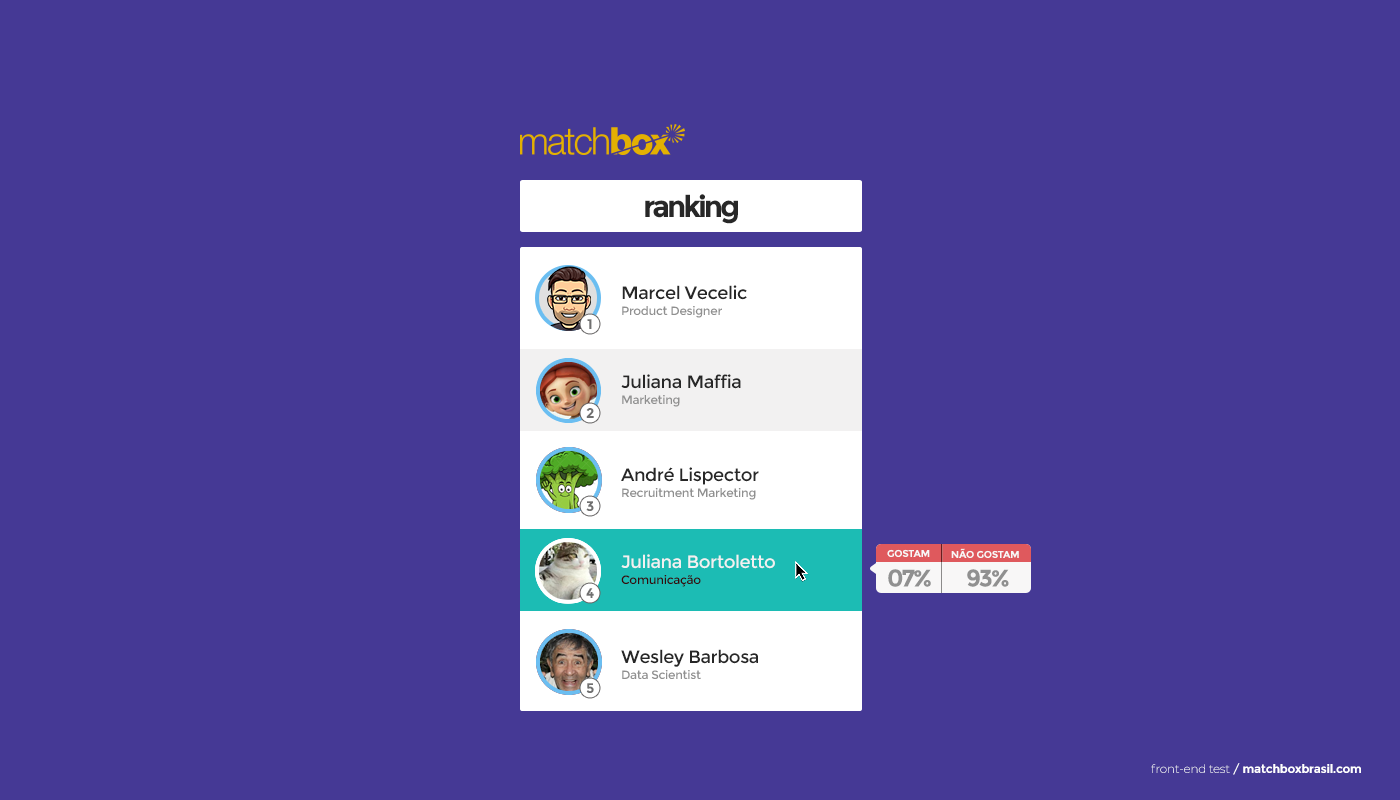
<style>
.page{position:relative;width:1400px;height:800px;background:#453995}
.page>*{position:absolute;margin:0}
.t1{font:30px "Montserrat-Bold";letter-spacing:-0.1em;color:#272727}
.t2{font:18px "Montserrat-Regular";letter-spacing:-0.025em;color:#272727}
.t3{font:12px "Montserrat-Regular";letter-spacing:-0.025em;color:#909090}
.t4{font:14px "Montserrat-Bold";letter-spacing:-0.1em;color:#707070}
.t5{font:18px "Montserrat-Regular";letter-spacing:-0.025em;color:#f2f1f1}
.t6{font:10px "Montserrat-Bold";letter-spacing:-0.025em;color:#f8f7f7}
.t7{font:24px "Montserrat-Bold";letter-spacing:-0.1em;color:#909090}
.t8{font:12px "Montserrat-Regular";letter-spacing:-0.025em;color:#330d0e}
.t9{font:12px "Montserrat-Bold";letter-spacing:-0.025em;color:#ffffff}
.t10{font:12px "Montserrat-Light";letter-spacing:-0.025em;color:#ffffff}
.t11{font:12px "Montserrat-Regular";letter-spacing:-0.025em;color:#ffffff}
</style>
<div class="page">
<p class="t1" style="left:645px;top:194px;width:93px;height:30px">ranking</p>
<p class="t2" style="left:622px;top:285px;width:125px;height:15px">Marcel Vecelic</p>
<p class="t3" style="left:622px;top:306px;width:100px;height:12px">Product Designer</p>
<p class="t4" style="left:587px;top:319px;width:5px;height:10px">1</p>
<p class="t2" style="left:621px;top:374px;width:120px;height:15px">Juliana Maffia</p>
<p class="t3" style="left:622px;top:395px;width:58px;height:12px">Marketing</p>
<p class="t4" style="left:586px;top:408px;width:8px;height:10px">2</p>
<p class="t2" style="left:621px;top:467px;width:138px;height:18px">André Lispector</p>
<p class="t3" style="left:622px;top:488px;width:134px;height:12px">Recruitment Marketing</p>
<p class="t4" style="left:586px;top:501px;width:8px;height:10px">3</p>
<p class="t5" style="left:621px;top:554px;width:154px;height:15px">Juliana Bortoletto</p>
<p class="t6" style="left:887px;top:549px;width:43px;height:8px">GOSTAM</p>
<p class="t6" style="left:951px;top:548px;width:68px;height:10px">NÃO GOSTAM</p>
<p class="t7" style="left:888px;top:569px;width:43px;height:18px">07%</p>
<p class="t7" style="left:967px;top:569px;width:42px;height:18px">93%</p>
<p class="t8" style="left:621px;top:575px;width:80px;height:12px">Comunicação</p>
<p class="t4" style="left:586px;top:588px;width:8px;height:10px">4</p>
<p class="t4" style="left:586px;top:588px;width:8px;height:10px">4</p>
<p class="t2" style="left:621px;top:649px;width:137px;height:18px">Wesley Barbosa</p>
<p class="t3" style="left:622px;top:670px;width:79px;height:9px">Data Scientist</p>
<p class="t4" style="left:586px;top:683px;width:8px;height:10px">5</p>
<p class="t9" style="left:1151px;top:763px;width:210px;height:12px"><span class="t10">front-end test</span><span class="t11"> / </span>matchboxbrasil.com</p>
</div>
